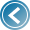
<style>
.page{position:relative;width:30px;height:30px;background:#ffffff}
.page>*{position:absolute;margin:0}
.t1{font:30px "Consolas-Bold";color:#ffffff}
</style>
<div class="page">
<p class="t1" style="left:8px;top:7px;width:12px;height:17px">&lt;</p>
</div>
